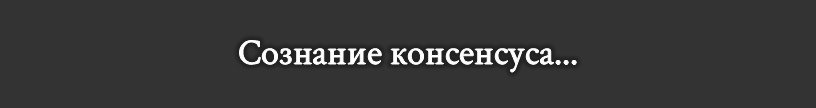
<style>
.page{position:relative;width:816px;height:108px;background:#333333}
.page>*{position:absolute;margin:0}
.t1{font:36px "CrimsonText-Regular";color:#ffffff}
</style>
<div class="page">
<p class="t1" style="left:239px;top:40px;width:338px;height:32px">Сознание консенсуса...</p>
</div>
